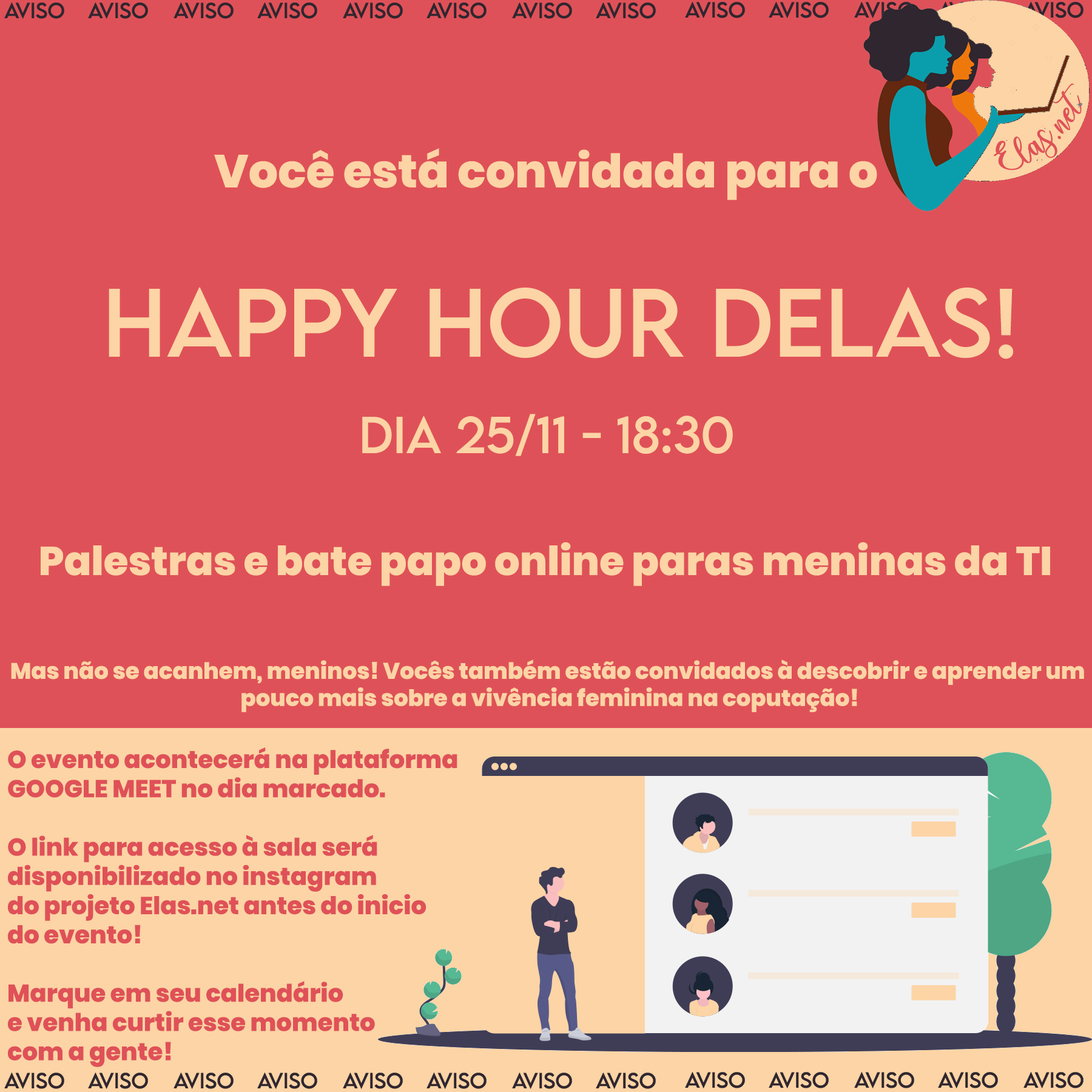
<style>
.page{position:relative;width:1092px;height:1092px;background:#df5158}
.page>*{position:absolute;margin:0}
.t1{font:25px "charlinda-Regular";color:#df5158;scale:1.18 1}
.t2{font:46.2px "Poppins-ExtraBold";color:#fcd4a5}
.t3{font:86.2px "LEMONMILK-Regular";color:#fcd4a5}
.t4{font:46.2px "LEMONMILK-Regular";color:#fcd4a5}
.t5{font:40.1px "Poppins-ExtraBold";color:#fcd4a5}
.t6{font:22.5px "Poppins-ExtraBold";color:#fcd4a5}
.t7{font:24.3px "Poppins-ExtraBold";color:#df5158}
</style>
<div class="page">
<p class="t1" style="left:994px;top:83px;width:88px;height:87px;rotate:-42deg">Elas.net</p>
<p class="t2" style="left:214px;top:148px;width:663px;height:52px">Você está convidada para o</p>
<p class="t3" style="left:109px;top:287px;width:905px;height:72px">happy hour Delas!</p>
<p class="t4" style="left:362px;top:414px;width:371px;height:42px">Dia 25/11 - 18:30</p>
<p class="t5" style="left:41px;top:542px;width:1009px;height:44px">Palestras e bate papo online paras meninas da TI</p>
<p class="t6" style="left:11px;top:659px;width:1073px;height:53px;text-align:center">Mas não se acanhem, meninos! Vocês também estão convidados à descobrir e aprender um <br>pouco mais sobre a vivência feminina na coputação!</p>
<p class="t7" style="left:8px;top:747px;width:449px;height:320px">O evento acontecerá na plataforma<br>GOOGLE MEET no dia marcado.<br><br>O link para acesso à sala será <br>disponibilizado no instagram<br>do projeto Elas.net antes do inicio<br>do evento!<br><br>Marque em seu calendário<br>e venha curtir esse momento <br>com a gente!</p>
</div>
